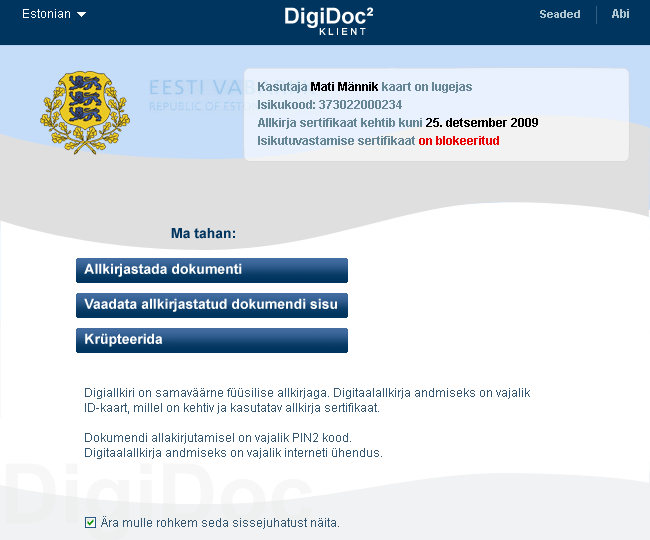
<style>
.page{position:relative;width:650px;height:540px;background:#ffffff}
.page>*{position:absolute;margin:0}
.t1{font:12px "ArialMT";color:#ffffff}
.t2{font:21.9px "Arial-BoldMT";color:#ffffff}
.t3{font:11px "Arial-BoldMT";color:#afc6d1}
.t4{font:12px "Arial-BoldMT";color:#afc6d1}
.t5{font:9.2px "ArialMT";letter-spacing:0.3em;color:#ffffff}
.t6{font:12px/18px "Arial-BoldMT";color:#668696}
.t7{font:12px/18px "Arial-BoldMT";color:#000000}
.t8{font:12px/18px "Arial-BoldMT";color:#e80303}
.t9{font:14px "Arial-BoldMT";color:#00355f}
.t10{font:14px/35px "Arial-BoldMT";color:#ffffff}
.t11{font:12px/15px "ArialMT";color:#355670}
.t12{font:12px "ArialMT";color:#355670}
</style>
<div class="page">
<p class="t1" style="left:23px;top:9px;width:47px;height:9px">Estonian</p>
<p class="t2" style="left:285px;top:7px;width:88px;height:21px">DigiDoc²</p>
<p class="t3" style="left:540px;top:10px;width:40px;height:8px">Seaded</p>
<p class="t4" style="left:612px;top:9px;width:17px;height:9px">Abi</p>
<p class="t5" style="left:319px;top:28px;width:47px;height:7px">KLIENT</p>
<p class="t6" style="left:258px;top:82px;width:280px;height:63px">Kasutaja <span class="t7">Mati Männik</span> kaart on lugejas<br>Isikukood: 373022000234<br>Allkirja sertifikaat kehtib kuni <span class="t7">25. detsember 2009<br></span>Isikutuvastamise sertifikaat <span class="t8">on blokeeritud</span></p>
<p class="t9" style="left:171px;top:228px;width:64px;height:11px">Ma tahan:</p>
<p class="t10" style="left:84px;top:263px;width:253px;height:84px">Allkirjastada dokumenti<br>Vaadata allkirjastatud dokumendi sisu<br>Krüpteerida</p>
<p class="t11" style="left:85px;top:388px;width:445px;height:71px">Digiallkiri on samaväärne füüsilise allkirjaga. Digitaalallkirja andmiseks on vajalik<br>ID-kaart, millel on kehtiv ja kasutatav allkirja sertifikaat.<br><br>Dokumendi allakirjutamisel on vajalik PIN2 kood.<br>Digitaalallkirja andmiseks on vajalik interneti ühendus.</p>
<p class="t12" style="left:101px;top:516px;width:238px;height:13px">Ära mulle rohkem seda sissejuhatust näita.</p>
</div>
